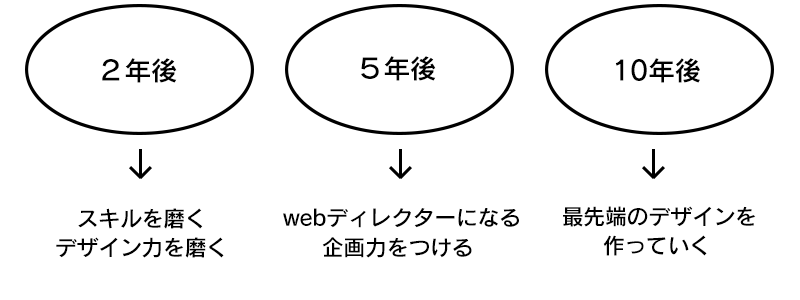
<style>
.page{position:relative;width:800px;height:300px;background:#ffffff}
.page>*{position:absolute;margin:0}
.t1{font:27px "RodinProN-DB";letter-spacing:-0.015em;color:#000000}
.t2{font:22px "RodinProN-DB";letter-spacing:-0.015em;color:#000000}
</style>
<div class="page">
<p class="t1" style="left:102px;top:58px;width:75px;height:25px">２年後</p>
<p class="t1" style="left:361px;top:56px;width:75px;height:25px">５年後</p>
<p class="t1" style="left:615px;top:58px;width:85px;height:25px">10年後</p>
<p class="t2" style="left:78px;top:208px;width:125px;height:21px">スキルを磨く</p>
<p class="t2" style="left:283px;top:208px;width:236px;height:20px">webディレクターになる</p>
<p class="t2" style="left:563px;top:206px;width:193px;height:21px">最先端のデザインを</p>
<p class="t2" style="left:56px;top:237px;width:168px;height:21px">デザイン力を磨く</p>
<p class="t2" style="left:322px;top:237px;width:150px;height:21px">企画力をつける</p>
<p class="t2" style="left:603px;top:235px;width:104px;height:21px">作っていく</p>
</div>
